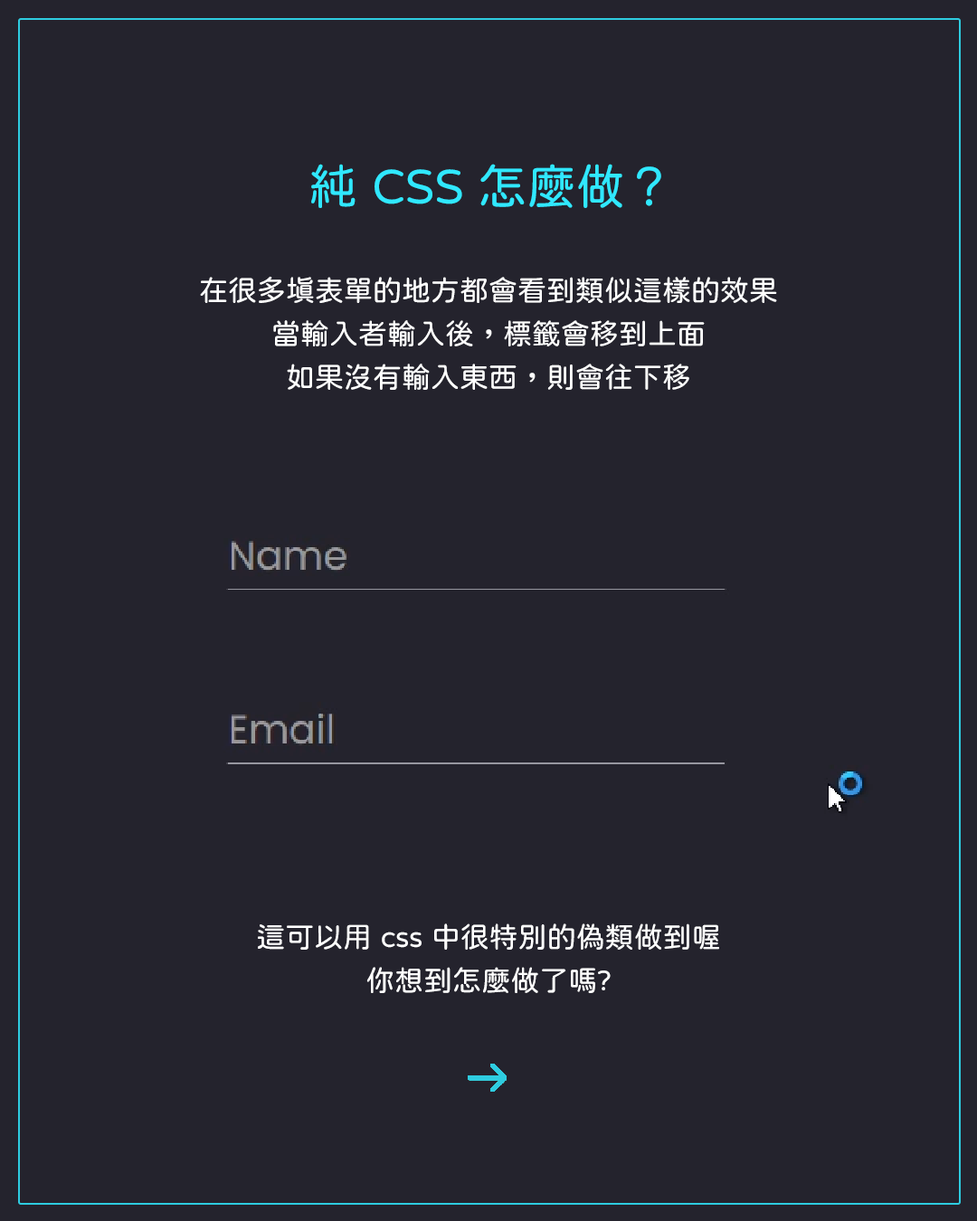
<style>
.page{position:relative;width:977px;height:1221px;background:#24232d}
.page>*{position:absolute;margin:0}
.t1{font:48.8px "jf-openhuninn-1.1";color:#30e8ff}
.t2{font:28.9px/43.4px "jf-openhuninn-1.1";color:#ffffff}
</style>
<div class="page">
<p class="t1" style="left:311px;top:164px;width:350px;height:44px">純 CSS 怎麼做？</p>
<p class="t2" style="left:200px;top:276px;width:577px;height:114px;text-align:center">在很多填表單的地方都會看到類似這樣的效果<br>當輸入者輸入後，標籤會移到上面<br>如果沒有輸入東西，則會往下移</p>
<p class="t2" style="left:258px;top:923px;width:461px;height:70px;text-align:center">這可以用 css 中很特別的偽類做到喔<br>你想到怎麼做了嗎?</p>
</div>
